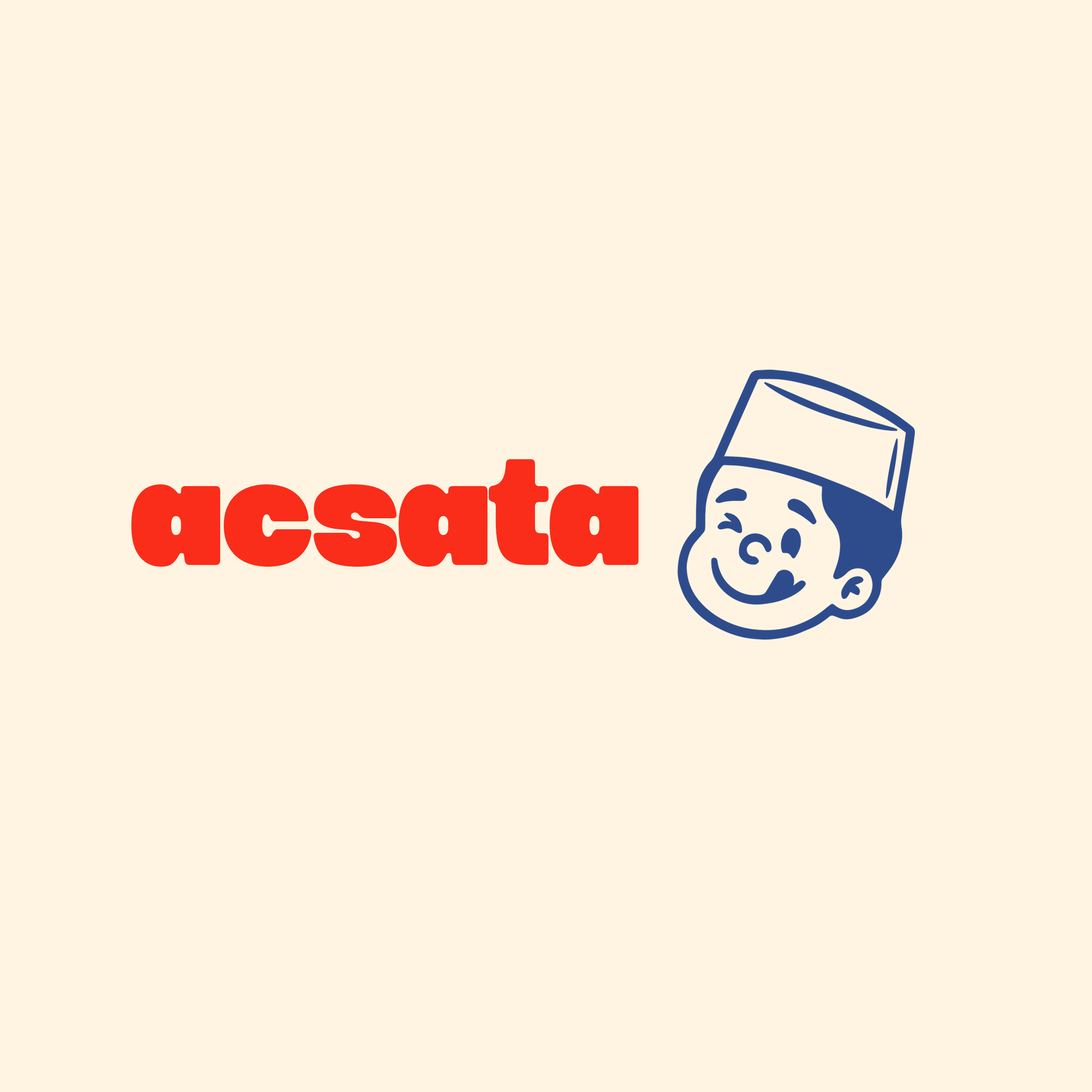
<style>
.page{position:relative;width:1092px;height:1092px;background:#fff4e2}
.page>*{position:absolute;margin:0}
.t1{font:157.5px "ChunkoBoldDemo";color:#fa2d1a;scale:0.89 1}
</style>
<div class="page">
<p class="t1" style="left:131px;top:459px;width:508px;height:108px">acsata</p>
</div>
